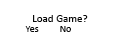
<style>
.page{position:relative;width:120px;height:48px;background:#ffffff}
.page>*{position:absolute;margin:0}
.t1{font:11px "Calibri";color:#080808}
.t2{font:10px "Calibri";color:#080808}
</style>
<div class="page">
<p class="t1" style="left:33px;top:15px;width:55px;height:7px">Load Game?</p>
<p class="t2" style="left:25px;top:26px;width:14px;height:6px">Yes</p>
<p class="t2" style="left:60px;top:26px;width:11px;height:6px">No</p>
</div>
